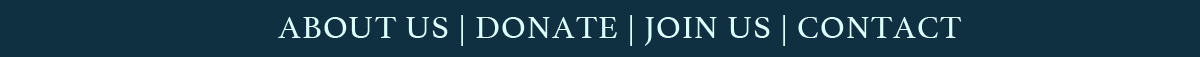
<style>
.page{position:relative;width:1200px;height:57px;background:#0f3040}
.page>*{position:absolute;margin:0}
.t1{font:33.3px "Athelas-Regular";letter-spacing:0.025em;color:#ddffff}
</style>
<div class="page">
<p class="t1" style="left:278px;top:15px;width:684px;height:31px">ABOUT US | DONATE | JOIN US | CONTACT</p>
</div>
